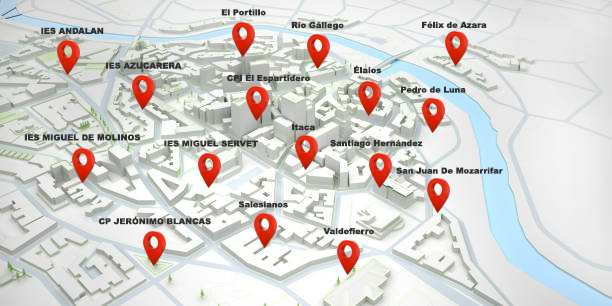
<style>
.page{position:relative;width:612px;height:306px}
.page>*{position:absolute;margin:0}
.t1{font:8.3px "Arial-Black";color:#313131}
</style>
<div class="page">
<p class="t1" style="left:221px;top:9px;width:45px;height:7px">El Portillo</p>
<p class="t1" style="left:41px;top:27px;width:63px;height:7px">IES ANDALAN</p>
<p class="t1" style="left:291px;top:21px;width:53px;height:9px">Río Gállego</p>
<p class="t1" style="left:422px;top:21px;width:65px;height:7px">Félix de Azara</p>
<p class="t1" style="left:106px;top:62px;width:76px;height:7px">IES AZUCARERA</p>
<p class="t1" style="left:354px;top:65px;width:28px;height:9px">Élaios</p>
<p class="t1" style="left:227px;top:74px;width:83px;height:9px">CPI El Espartidero</p>
<p class="t1" style="left:401px;top:86px;width:65px;height:7px">Pedro de Luna</p>
<p class="t1" style="left:292px;top:122px;width:23px;height:9px">Ítaca</p>
<p class="t1" style="left:24px;top:134px;width:117px;height:7px">IES MIGUEL DE MOLINOS</p>
<p class="t1" style="left:164px;top:140px;width:94px;height:7px">IES MIGUEL SERVET</p>
<p class="t1" style="left:330px;top:139px;width:93px;height:9px">Santiago Hernández</p>
<p class="t1" style="left:396px;top:167px;width:107px;height:7px">San Juan De Mozarrifar</p>
<p class="t1" style="left:238px;top:201px;width:50px;height:7px">Salesianos</p>
<p class="t1" style="left:98px;top:216px;width:113px;height:9px">CP JERÓNIMO BLANCAS</p>
<p class="t1" style="left:323px;top:227px;width:51px;height:8px">Valdefierro</p>
</div>
